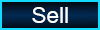
<style>
.page{position:relative;width:100px;height:30px}
.page>*{position:absolute;margin:0}
.t1{font:25px "Vrinda";color:#ffffff}
</style>
<div class="page">
<p class="t1" style="left:32px;top:7px;width:36px;height:16px">Sell</p>
</div>
